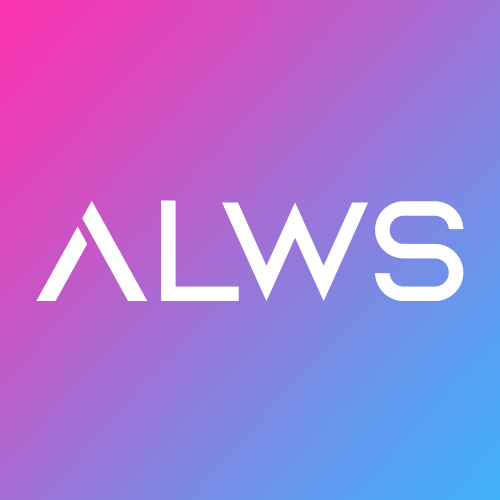
<style>
.page{position:relative;width:500px;height:500px}
.page>*{position:absolute;margin:0}
.t1{font:150px "AquireRegular";color:#ffffff}
</style>
<div class="page">
<p class="t1" style="left:36px;top:200px;width:428px;height:101px">ALWS</p>
</div>
